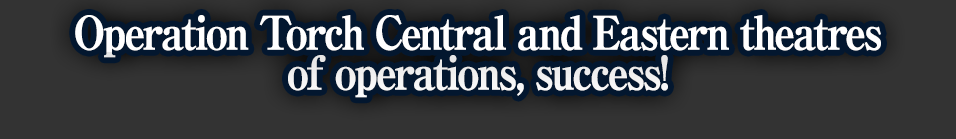
<style>
.page{position:relative;width:956px;height:139px;background:#333333}
.page>*{position:absolute;margin:0}
.t1{font:46px/40px "RyuminPro-ExBold";letter-spacing:-0.08em;color:#ffffff;font-weight:bold;scale:0.9 1}
</style>
<div class="page">
<p class="t1" style="left:75px;top:15px;width:806px;height:83px;text-align:center">Operation Torch Central and Eastern theatres<br>of operations, success!</p>
</div>
